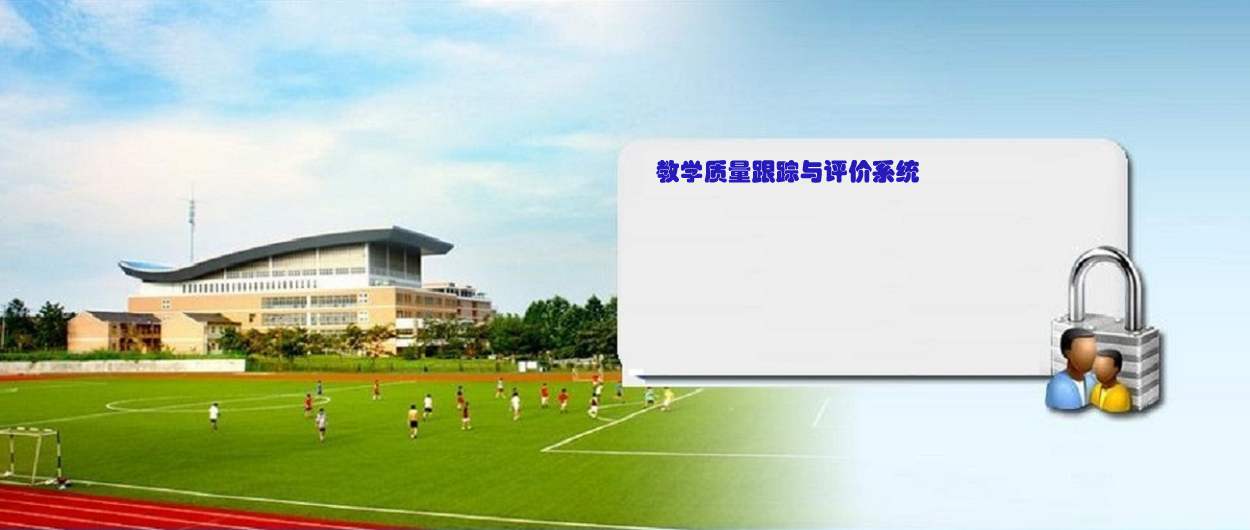
<style>
.page{position:relative;width:1250px;height:530px}
.page>*{position:absolute;margin:0}
.t1{font:24px "STHupo";color:#261bb8}
</style>
<div class="page">
<p class="t1" style="left:656px;top:159px;width:263px;height:24px">教学质量跟踪与评价系统</p>
</div>
